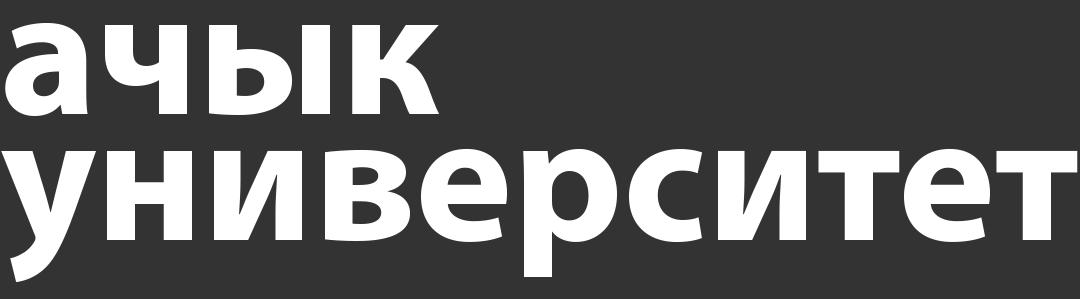
<style>
.page{position:relative;width:1080px;height:299px;background:#333333}
.page>*{position:absolute;margin:0}
.t1{font:184.6px/126.2px "MyriadPro-Bold";color:#ffffff}
</style>
<div class="page">
<p class="t1" style="left:1px;top:22px;width:1077px;height:261px">ачык<br>университет</p>
</div>
